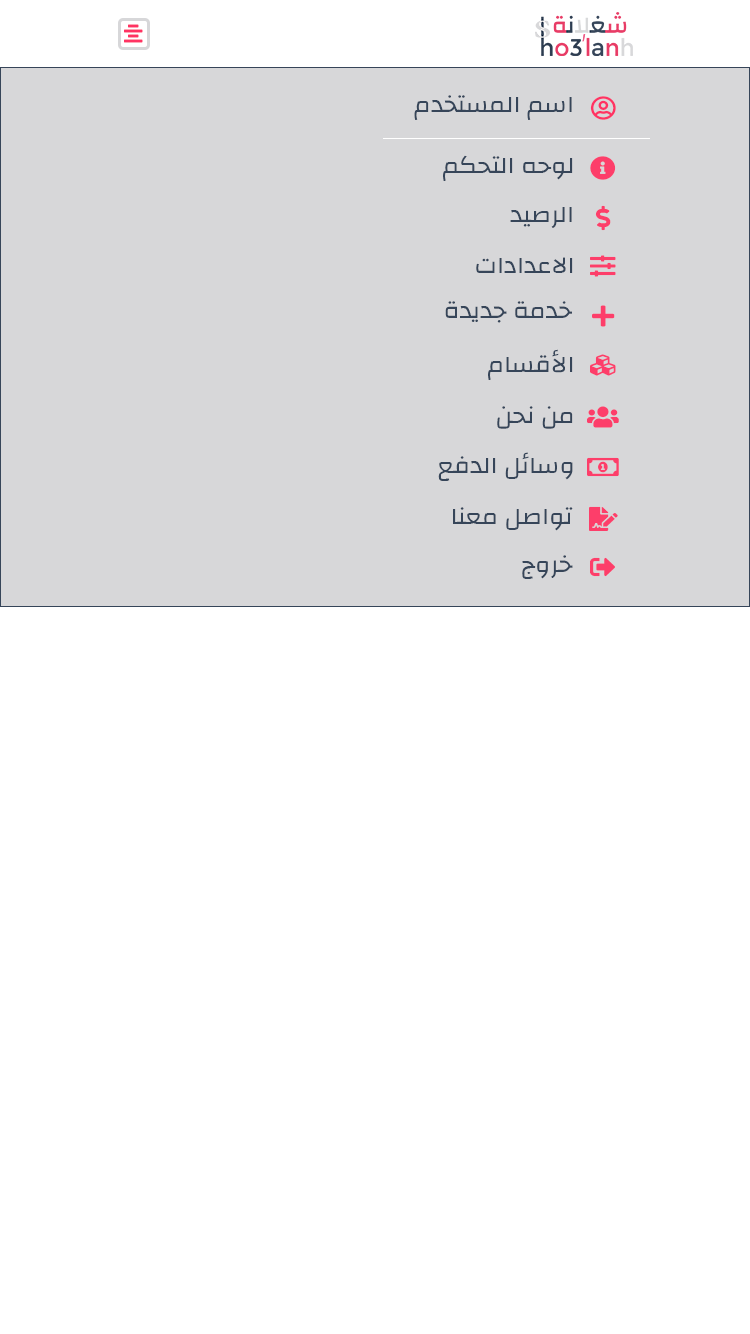
<style>
.page{position:relative;width:750px;height:1334px;background:#ffffff}
.page>*{position:absolute;margin:0}
.t1{font:24px "Changa-Regular";color:#364559;scale:1.06 1}
</style>
<div class="page">
<p class="t1" style="left:414px;top:95px;width:158px;height:25px">اسم المستخدم</p>
<p class="t1" style="left:443px;top:155px;width:130px;height:26px">لوحه التحكم</p>
<p class="t1" style="left:510px;top:207px;width:62px;height:21px">الرصيد</p>
<p class="t1" style="left:476px;top:257px;width:97px;height:16px">الاعدادات</p>
<p class="t1" style="left:445px;top:301px;width:127px;height:22px">خدمة جديدة</p>
<p class="t1" style="left:488px;top:349px;width:85px;height:31px">الأقسام</p>
<p class="t1" style="left:497px;top:406px;width:76px;height:23px">من نحن</p>
<p class="t1" style="left:438px;top:452px;width:135px;height:29px">وسائل الدفع</p>
<p class="t1" style="left:453px;top:507px;width:120px;height:24px">تواصل معنا</p>
<p class="t1" style="left:522px;top:555px;width:51px;height:24px">خروج</p>
</div>
